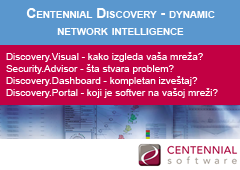
<style>
.page{position:relative;width:240px;height:170px;background:#c20043}
.page>*{position:absolute;margin:0}
.t1{font:10px "ArialMT";color:#ffffff}
.t2{font:14px "Arial-BoldMT";color:#ffffff;font-variant:small-caps}
</style>
<div class="page">
<p class="t1" style="left:6px;top:8px;width:212px;height:90px;text-align:center"><span class="t2">Centennial Discovery - dynamic network intelligence<br><br></span>Discovery.Visual - kako izgleda vaša mreža?<br>Security.Advisor - šta stvara problem?<br>Discovery.Dashboard - kompletan izveštaj?<br>Discovery.Portal - koji je softver na vašoj mreži?</p>
</div>
